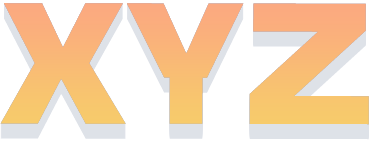
<style>
.page{position:relative;width:375px;height:148px;background:#ffffff}
.page>*{position:absolute;margin:0}
.t1{font:154px "BasementGrotesque-Black";color:#f9b977}
.t2{font:154px "BasementGrotesque-Black";color:#f9ba77}
.t3{font:154px "BasementGrotesque-Black";color:#f9b876}
.t4{font:154px "BasementGrotesque-Black";color:#f9bb78}
.t5{font:154px "BasementGrotesque-Black";color:#f9bc78}
.t6{font:154px "BasementGrotesque-Black";color:#f9bd78}
.t7{font:154px "BasementGrotesque-Black";color:#f8bd78}
.t8{font:154px "BasementGrotesque-Black";color:#f8be78}
.t9{font:154px "BasementGrotesque-Black";color:#f8bf79}
.t10{font:154px "BasementGrotesque-Black";color:#f8c079}
.t11{font:154px "BasementGrotesque-Black";color:#f8c179}
.t12{font:154px "BasementGrotesque-Black"}
</style>
<div class="page">
<p class="t1" style="left:0px;top:4px;width:369px;height:122px">XYZ</p>
<p class="t1" style="left:0px;top:5px;width:369px;height:122px">XYZ</p>
<p class="t2" style="left:0px;top:6px;width:369px;height:122px">XYZ</p>
<p class="t3" style="left:0px;top:3px;width:369px;height:122px">XYZ</p>
<p class="t3" style="left:0px;top:3px;width:369px;height:122px">XYZ</p>
<p class="t3" style="left:0px;top:3px;width:369px;height:122px">XYZ</p>
<p class="t4" style="left:0px;top:7px;width:369px;height:122px">XYZ</p>
<p class="t5" style="left:0px;top:8px;width:369px;height:122px">XYZ</p>
<p class="t6" style="left:0px;top:9px;width:369px;height:122px">XYZ</p>
<p class="t7" style="left:0px;top:10px;width:369px;height:122px">XYZ</p>
<p class="t8" style="left:0px;top:11px;width:369px;height:122px">XYZ</p>
<p class="t9" style="left:0px;top:12px;width:369px;height:122px">XYZ</p>
<p class="t10" style="left:0px;top:13px;width:369px;height:122px">XYZ</p>
<p class="t11" style="left:0px;top:14px;width:369px;height:122px">XYZ</p>
<p class="t12" style="left:0px;top:15px;width:369px;height:122px">XYZ</p>
<p class="t12" style="left:0px;top:16px;width:369px;height:122px">XYZ</p>
<p class="t12" style="left:0px;top:17px;width:369px;height:122px">XYZ</p>
<p class="t12" style="left:0px;top:18px;width:369px;height:122px">XYZ</p>
</div>
